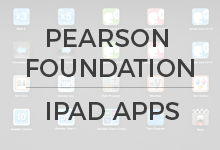
<style>
.page{position:relative;width:220px;height:150px}
.page>*{position:absolute;margin:0}
.t1{font:25px "Montserrat-Regular";color:#3d3d3d}
</style>
<div class="page">
<p class="t1" style="left:27px;top:29px;width:167px;height:48px;text-align:center">PEARSON <br>FOUNDATION</p>
<p class="t1" style="left:47px;top:102px;width:132px;height:18px">IPAD APPS</p>
</div>
